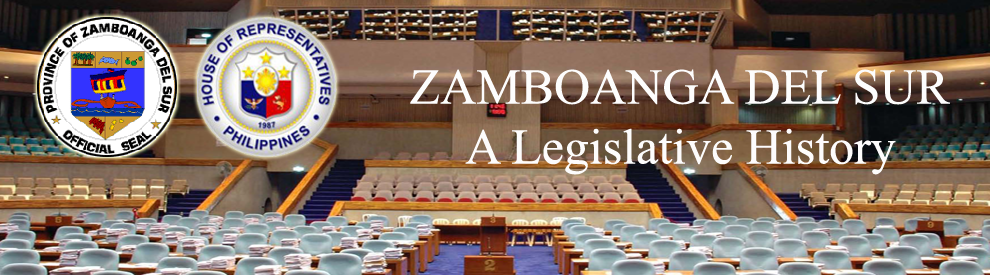
<style>
.page{position:relative;width:990px;height:275px}
.page>*{position:absolute;margin:0}
.t1{font:50px "TimesNewRomanPSMT";color:#fdfcfc}
.t2{font:50px "TimesNewRomanPSMT";color:#fdfdfd}
</style>
<div class="page">
<p class="t1" style="left:410px;top:69px;width:540px;height:106px;text-align:center"><span class="t2">ZAMBOANGA DEL SUR<br></span>A Legislative History</p>
</div>
